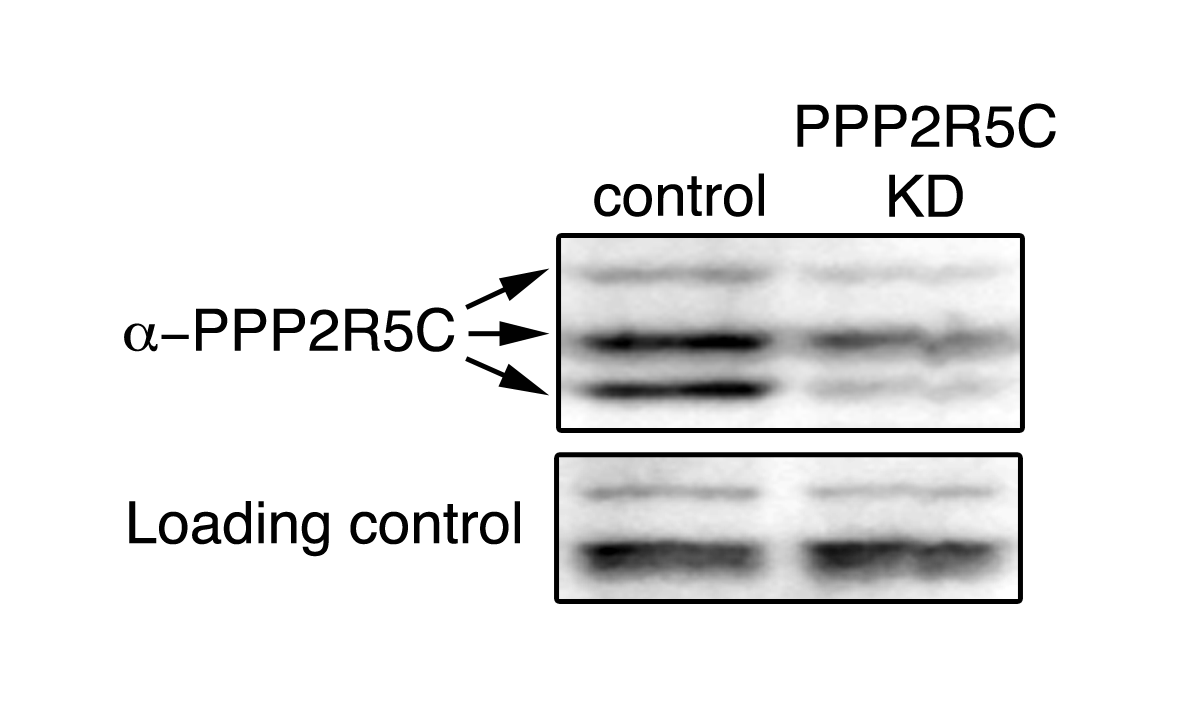
<style>
.page{position:relative;width:1181px;height:709px;background:#ffffff}
.page>*{position:absolute;margin:0}
.t1{font:58.3px "Helvetica";color:#010101}
.t2{font:58.3px "Symbol";color:#010101}
</style>
<div class="page">
<p class="t1" style="left:797px;top:103px;width:259px;height:114px;text-align:center">PPP2R5C<br>KD</p>
<p class="t1" style="left:594px;top:173px;width:170px;height:44px">control</p>
<p class="t1" style="left:124px;top:307px;width:331px;height:45px"><span class="t2">a-</span>PPP2R5C</p>
<p class="t1" style="left:129px;top:501px;width:391px;height:56px">Loading control</p>
</div>
